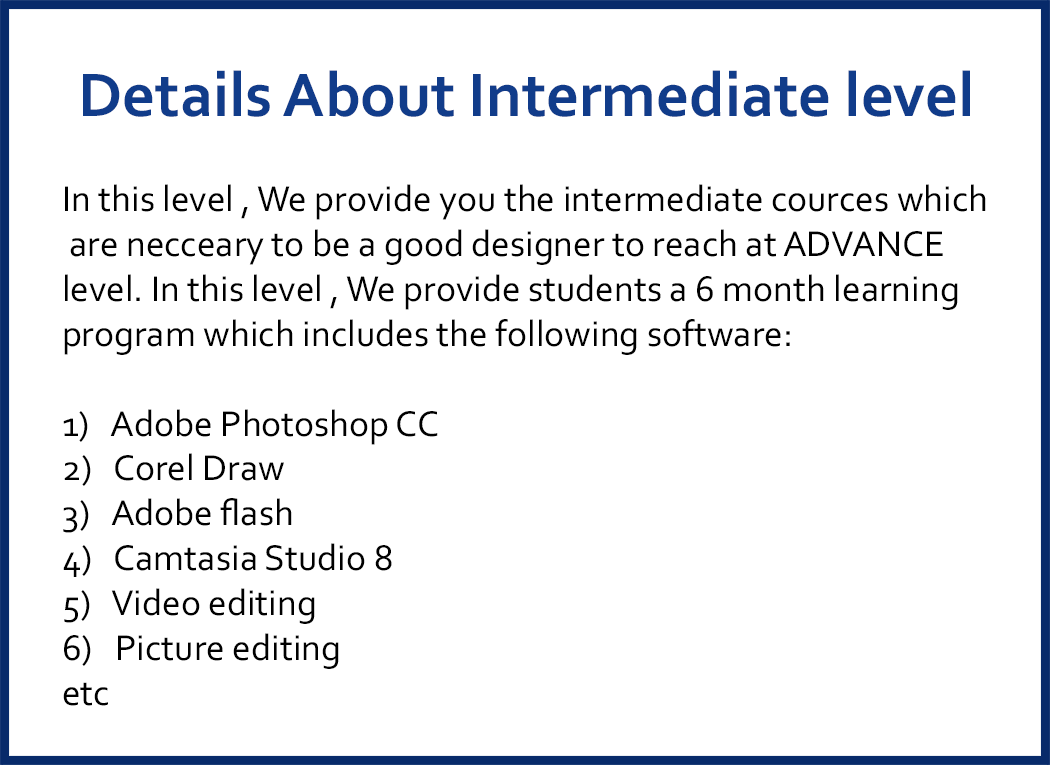
<style>
.page{position:relative;width:1050px;height:765px;background:#ffffff}
.page>*{position:absolute;margin:0}
.t1{font:64.2px "Corbel-Bold";color:#113c8a}
.t2{font:37.4px "Corbel";color:#000000}
</style>
<div class="page">
<p class="t1" style="left:83px;top:70px;width:887px;height:47px">Details About Intermediate level</p>
<p class="t2" style="left:63px;top:184px;width:923px;height:522px">In this level , We provide you the intermediate cources which<br> are necceary to be a good designer to reach at ADVANCE<br>level. In this level , We provide students a 6 month learning <br>program which includes the following software:<br><br>1)   Adobe Photoshop CC<br>2)   Corel Draw<br>3)   Adobe flash <br>4)   Camtasia Studio 8<br>5)   Video editing <br>6)   Picture editing <br>etc</p>
</div>
